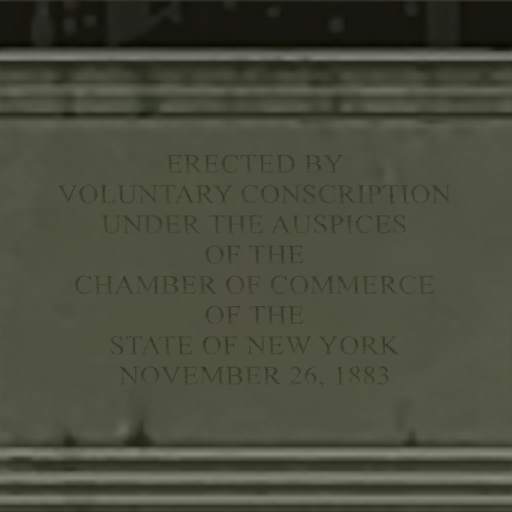
<style>
.page{position:relative;width:512px;height:512px}
.page>*{position:absolute;margin:0}
.t1{font:25.4px/30.3px "TimesNewRomanPSMT";letter-spacing:0.025em;color:#4f5240;scale:1.1 1}
.t2{font:25.4px "TimesNewRomanPSMT";letter-spacing:0.02em;color:#4f5240;scale:1.1 1}
.t3{font:25.4px "TimesNewRomanPSMT";letter-spacing:0.025em;color:#4f5240;scale:1.1 1}
</style>
<div class="page">
<p class="t1" style="left:57px;top:155px;width:394px;height:199px;text-align:center">ERECTED BY<br>VOLUNTARY CONSCRIPTION<br>UNDER THE AUSPICES<br>OF THE<br>CHAMBER OF COMMERCE<br>OF THE<br>STATE OF NEW YORK</p>
<p class="t2" style="left:118px;top:366px;width:271px;height:22px"><span class="t3"><br><br><br><br><br><br><br></span>NOVEMBER 26, 1883</p>
</div>
